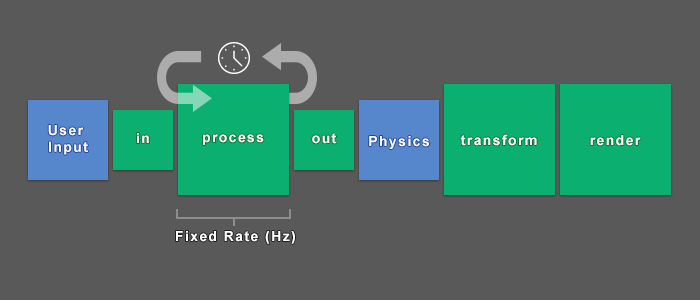
<style>
.page{position:relative;width:700px;height:300px;background:#595959}
.page>*{position:absolute;margin:0}
.t1{font:14px "Arial-BoldMT";letter-spacing:0.1em;color:#ffffff}
</style>
<div class="page">
<p class="t1" style="left:48px;top:125px;width:40px;height:30px;text-align:center">User <br>Input</p>
<p class="t1" style="left:137px;top:133px;width:12px;height:10px">in</p>
<p class="t1" style="left:203px;top:134px;width:61px;height:11px">process</p>
<p class="t1" style="left:312px;top:133px;width:25px;height:11px">out</p>
<p class="t1" style="left:369px;top:136px;width:60px;height:13px">Physics</p>
<p class="t1" style="left:460px;top:134px;width:77px;height:12px">transform</p>
<p class="t1" style="left:590px;top:135px;width:51px;height:11px">render</p>
<p class="t1" style="left:176px;top:231px;width:119px;height:13px">Fixed Rate (Hz)</p>
</div>
